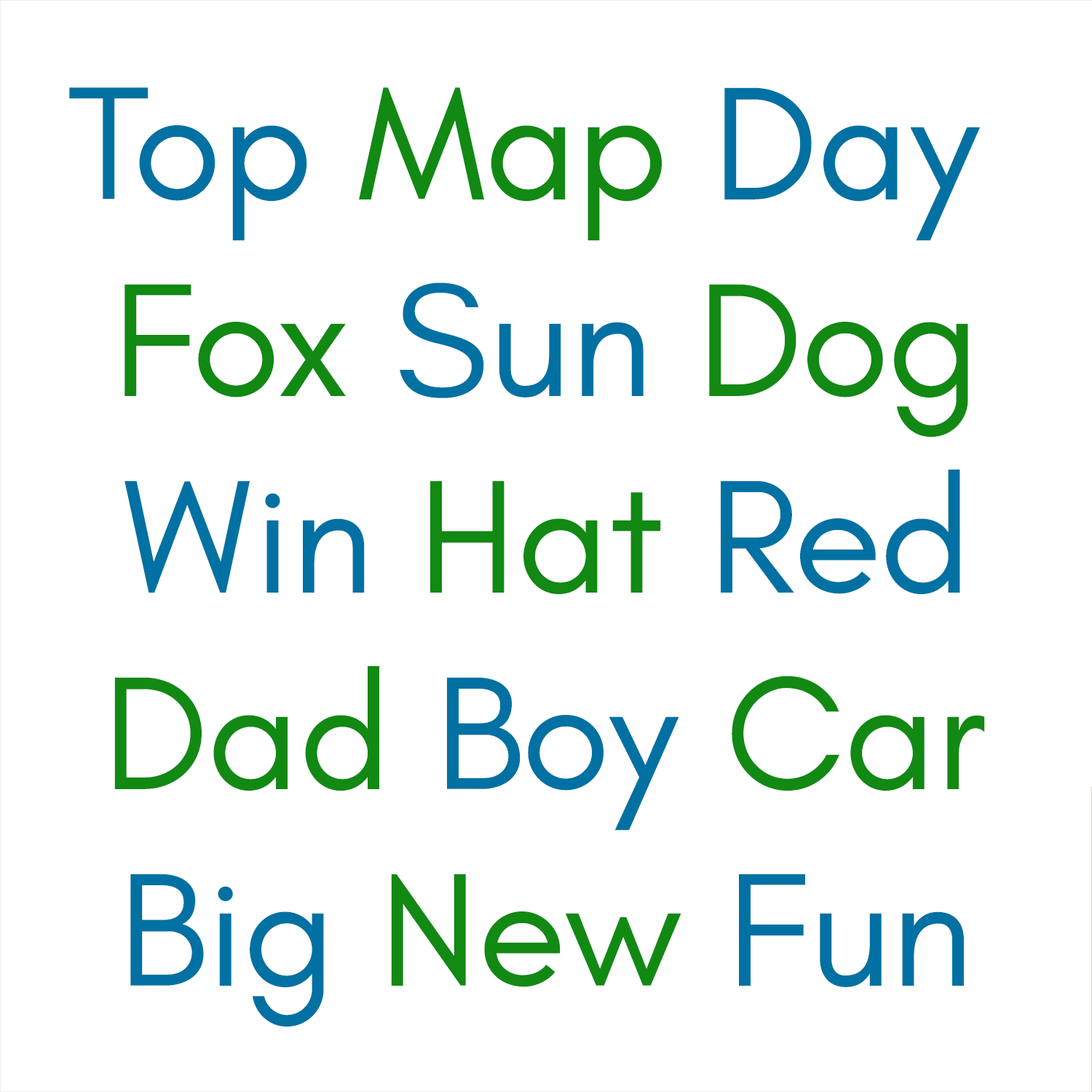
<style>
.page{position:relative;width:1092px;height:1092px;background:#ffffff}
.page>*{position:absolute;margin:0}
.t1{font:163.8px "Teachers-Regular";color:#0071a2}
.t2{font:163.8px "Teachers-Regular";color:#118913}
</style>
<div class="page">
<p class="t1" style="left:69px;top:87px;width:916px;height:940px;text-align:center">Top <span class="t2">Map </span>Day <span class="t2"><br>Fox </span>Sun<span class="t2"> Dog</span><br>Win <span class="t2">Hat </span>Red<span class="t2"><br>Dad </span>Boy <span class="t2">Car<br></span>Big <span class="t2">New </span>Fun</p>
</div>
